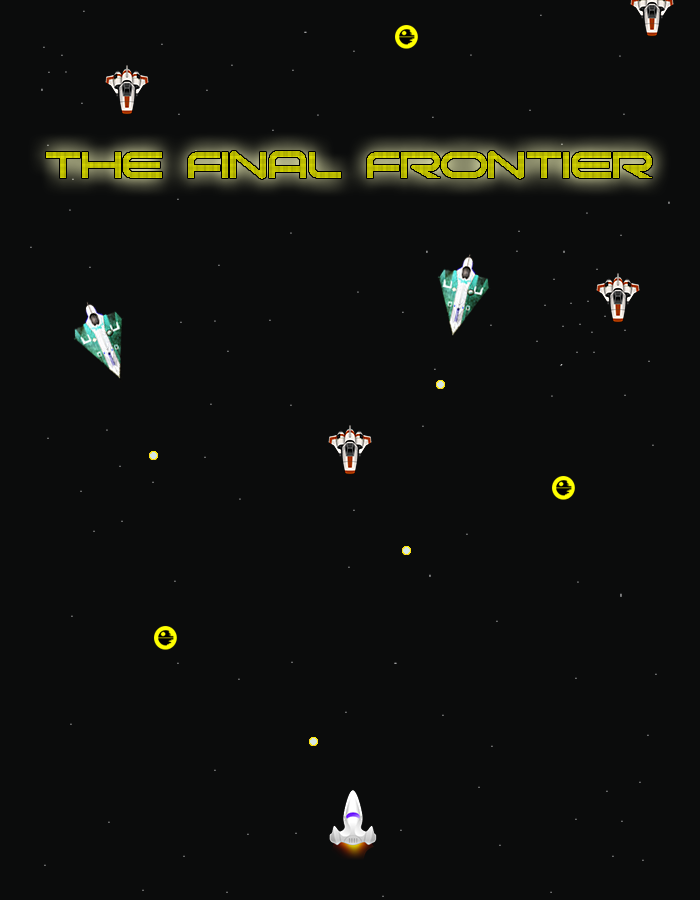
<style>
.page{position:relative;width:700px;height:900px;background:#0b0c0c}
.page>*{position:absolute;margin:0}
.t1{font:48px "moonhouse";color:#bcbc00;text-transform:uppercase}
</style>
<div class="page">
<p class="t1" style="left:46px;top:151px;width:606px;height:28px">the final frontier</p>
</div>
